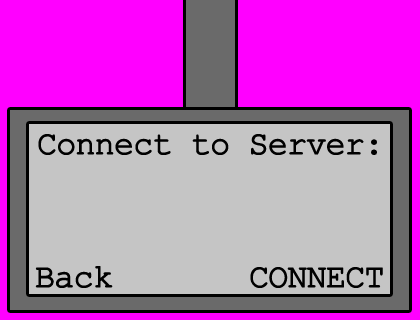
<style>
.page{position:relative;width:420px;height:320px;background:#c5c5c5}
.page>*{position:absolute;margin:0}
.t1{font:33.3px "CourierNewPSMT";letter-spacing:-0.05em;color:#000000;font-weight:bold}
</style>
<div class="page">
<p class="t1" style="left:38px;top:134px;width:339px;height:21px">Connect to Server:</p>
<p class="t1" style="left:35px;top:266px;width:78px;height:22px">Back</p>
<p class="t1" style="left:250px;top:267px;width:133px;height:21px">CONNECT</p>
</div>
